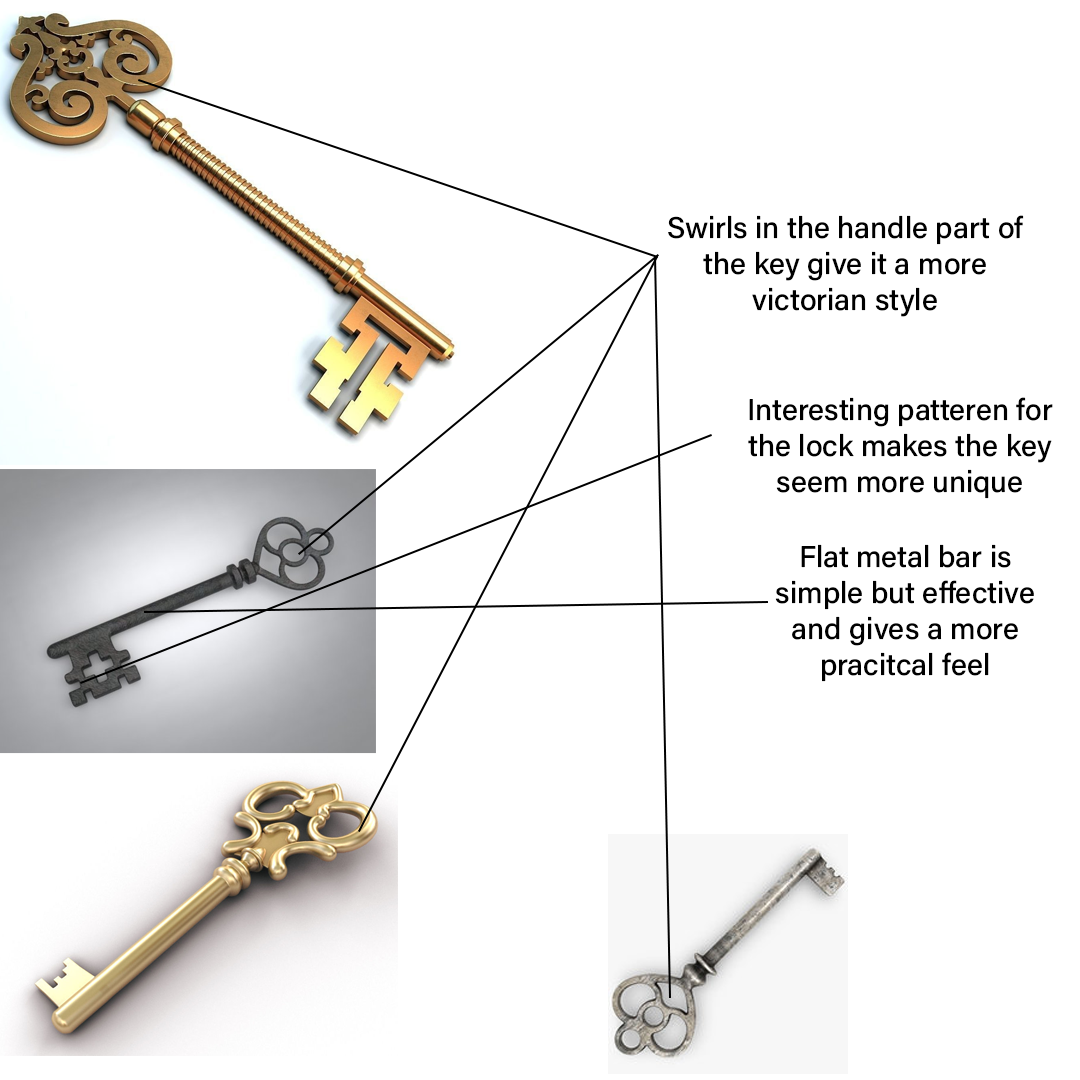
<style>
.page{position:relative;width:1080px;height:1080px;background:#ffffff}
.page>*{position:absolute;margin:0}
.t1{font:30px "AcuminConcept-Medium";color:#000000}
</style>
<div class="page">
<p class="t1" style="left:668px;top:215px;width:356px;height:102px;text-align:center">Swirls in the handle part of the key give it a more victorian style</p>
<p class="t1" style="left:748px;top:397px;width:305px;height:102px;text-align:center">Interesting patteren for the lock makes the key seem more unique</p>
<p class="t1" style="left:775px;top:544px;width:259px;height:138px;text-align:center">Flat metal bar is simple but effective and gives a more pracitcal feel</p>
</div>
